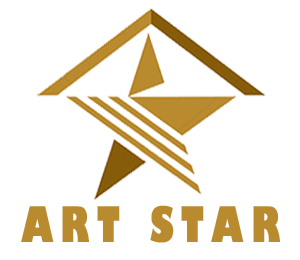
<style>
.page{position:relative;width:300px;height:260px;background:#ffffff}
.page>*{position:absolute;margin:0}
.t1{font:48px "GillSans-UltraBoldCondensed";letter-spacing:0.15em;color:#b98a2e}
</style>
<div class="page">
<p class="t1" style="left:21px;top:205px;width:259px;height:38px">ART STAR</p>
</div>
